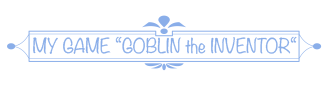
<style>
.page{position:relative;width:324px;height:92px;background:#ffffff}
.page>*{position:absolute;margin:0}
.t1{font:18px "Noteworthy-Light";color:#8aaee9}
</style>
<div class="page">
<p class="t1" style="left:33px;top:36px;width:264px;height:18px">MY GAME “GOBLIN the INVENTOR“</p>
</div>
